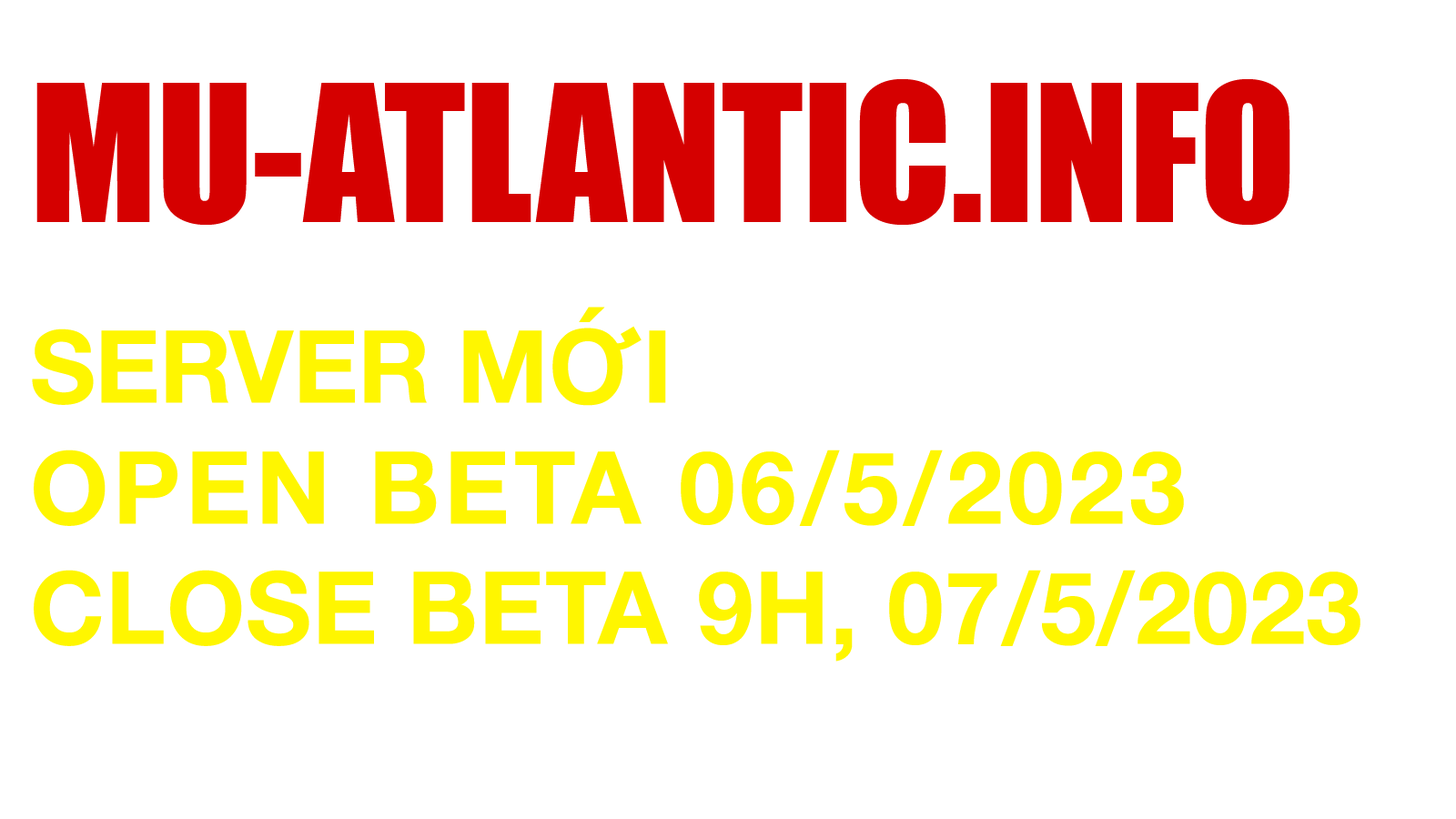
<style>
.page{position:relative;width:1456px;height:819px;background:#ffffff}
.page>*{position:absolute;margin:0}
.t1{font:100.6px "HelveticaNeue-Bold";letter-spacing:0.01em;color:#fff600}
.t2{font:176.1px "Impact";color:#d50000}
.t3{font:100.6px "HelveticaNeue-Bold";letter-spacing:-0.005em;color:#fff600}
.t4{font:151px "HelveticaNeue-Bold";letter-spacing:-0.005em;color:#ffffff}
.t5{font:100.6px "HelveticaNeue-Bold";letter-spacing:0.05em;color:#fff600}
</style>
<div class="page">
<p class="t1" style="left:32px;top:79px;width:1395px;height:583px"><span class="t2">MU-ATLANTIC.INFO<br></span><span class="t3">SERVER MỚI </span><span class="t4">ATLANTIC<br></span><span class="t5">OPEN BETA 06/5/2023<br></span>CLOSE BETA 9H, 07/5/2023</p>
</div>
